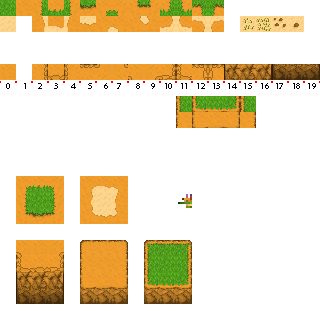
<style>
.page{position:relative;width:320px;height:320px;background:#ffffff}
.page>*{position:absolute;margin:0}
.t1{font:9px "MyriadPro-Regular";color:#000000}
</style>
<div class="page">
<p class="t1" style="left:6px;top:83px;width:4px;height:6px">0</p>
<p class="t1" style="left:24px;top:83px;width:2px;height:6px">1</p>
<p class="t1" style="left:38px;top:83px;width:4px;height:6px">2</p>
<p class="t1" style="left:54px;top:83px;width:4px;height:6px">3</p>
<p class="t1" style="left:71px;top:83px;width:5px;height:6px">4</p>
<p class="t1" style="left:88px;top:83px;width:4px;height:6px">5</p>
<p class="t1" style="left:104px;top:83px;width:4px;height:6px">6</p>
<p class="t1" style="left:117px;top:83px;width:4px;height:6px">7</p>
<p class="t1" style="left:136px;top:83px;width:4px;height:6px">8</p>
<p class="t1" style="left:151px;top:83px;width:4px;height:6px">9</p>
<p class="t1" style="left:165px;top:83px;width:7px;height:6px">10</p>
<p class="t1" style="left:181px;top:83px;width:6px;height:6px">11</p>
<p class="t1" style="left:197px;top:83px;width:8px;height:6px">12</p>
<p class="t1" style="left:213px;top:83px;width:7px;height:6px">13</p>
<p class="t1" style="left:228px;top:83px;width:9px;height:6px">14</p>
<p class="t1" style="left:244px;top:83px;width:8px;height:6px">15</p>
<p class="t1" style="left:261px;top:83px;width:8px;height:6px">16</p>
<p class="t1" style="left:276px;top:83px;width:7px;height:6px">17</p>
<p class="t1" style="left:293px;top:83px;width:7px;height:6px">18</p>
<p class="t1" style="left:308px;top:83px;width:8px;height:6px">19</p>
</div>
